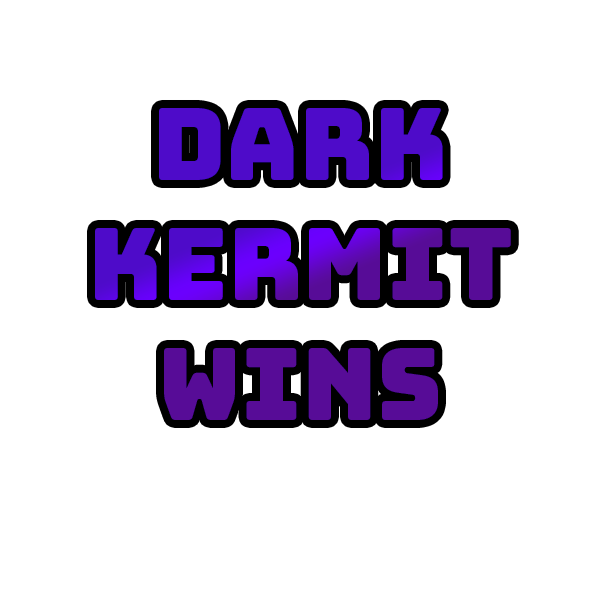
<style>
.page{position:relative;width:600px;height:600px;background:#ffffff}
.page>*{position:absolute;margin:0}
.t1{font:100px "Bungee-Regular"}
</style>
<div class="page">
<p class="t1" style="left:95px;top:108px;width:416px;height:312px;text-align:center">Dark Kermit Wins</p>
</div>
